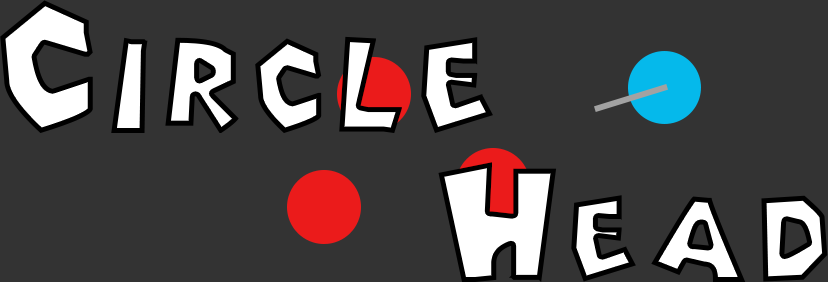
<style>
.page{position:relative;width:828px;height:282px;background:#333333}
.page>*{position:absolute;margin:0}
.t1{font:190.4px "PipeDream"}
.t2{font:171px "PipeDream";color:#ffffff}
</style>
<div class="page">
<p class="t1" style="left:0px;top:0px;width:493px;height:133px">Circle</p>
<p class="t2" style="left:438px;top:162px;width:390px;height:120px">Head</p>
</div>
